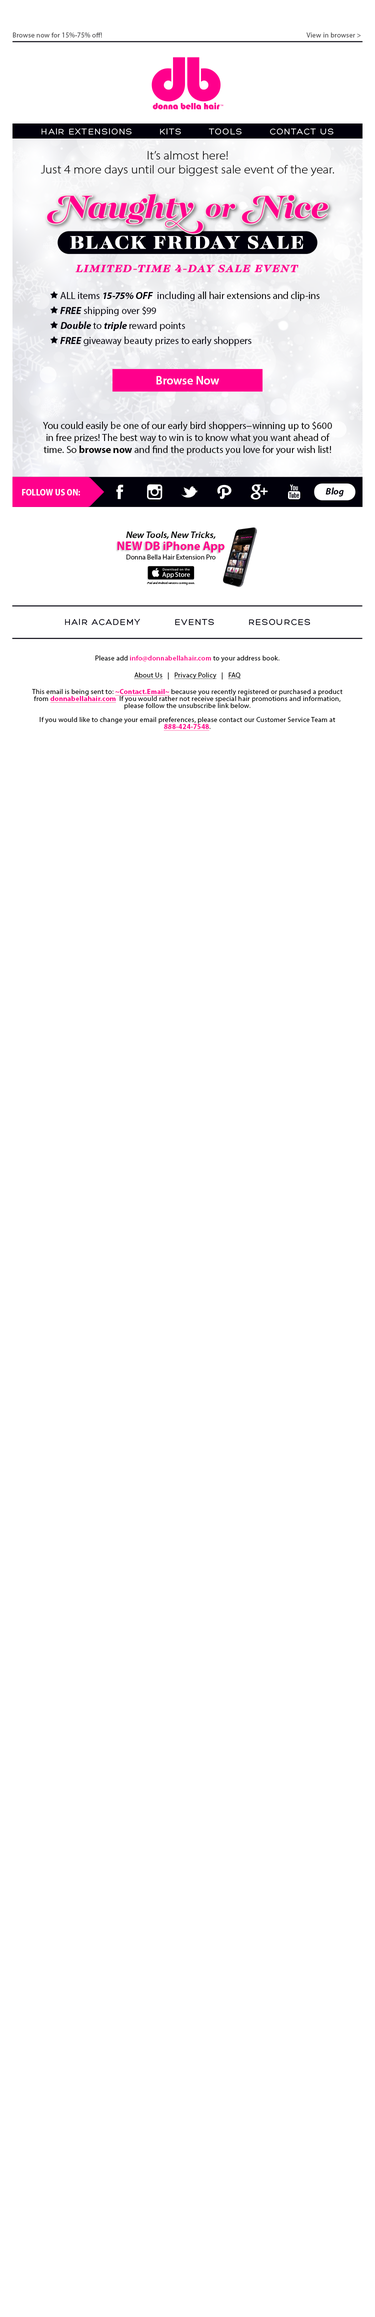
<style>
.page{position:relative;width:375px;height:2317px;background:#ffffff}
.page>*{position:absolute;margin:0}
.t1{font:7px "MyriadPro-Regular";letter-spacing:0.025em;color:#4d4d4f}
.t2{font:9px "Hero";letter-spacing:0.1em;color:#ffffff}
.t3{font:12px "MyriadPro-LightSemiExt";color:#000000}
.t4{font:12px "MyriadPro-Semibold";color:#ffffff}
.t5{font:10px "MyriadPro-Regular";color:#000000}
.t6{font:10px "MyriadPro-Bold";color:#000000}
.t7{font:9px "MyriadPro-BoldSemiCn";color:#ffffff}
.t8{font:9.3px "MyriadPro-BoldIt";color:#01000b}
.t9{font:9px "MyriadPro-SemiboldSemiExtIt";color:#000000}
.t10{font:12px "MyriadPro-Bold";color:#ff008c}
.t11{font:7px "MyriadPro-Regular";color:#000000}
.t12{font:3px "MyriadPro-It";color:#000000}
.t13{font:9px "Hero";letter-spacing:0.1em;color:#01000b}
.t14{font:7px/7px "MyriadPro-Regular";letter-spacing:0.025em;color:#000000}
.t15{font:7px "MyriadPro-Regular";letter-spacing:0.025em;color:#000000}
.t16{font:7px "MyriadPro-Semibold";letter-spacing:0.025em;color:#ff008c}
.t17{font:7px "MyriadPro-Regular";letter-spacing:0.025em;color:#000000;text-decoration:underline}
.t18{font:7px "MyriadPro-Bold";letter-spacing:0.025em;color:#ff008c;text-decoration:underline}
.t19{font:7px/7px "MyriadPro-Bold";letter-spacing:0.025em;color:#ff008c;text-decoration:underline}
</style>
<div class="page">
<p class="t1" style="left:13px;top:32px;width:348px;height:6px">Browse now for 15%­-75% off!                         View in browser &gt;</p>
<p class="t2" style="left:42px;top:128px;width:292px;height:7px">HAIR EXTENSIONS        KITS        TOOLS        CONTACT US</p>
<p class="t3" style="left:40px;top:151px;width:294px;height:25px;text-align:center">It’s almost here!<br>Just 4 more days until our biggest sale event of the year.</p>
<p class="t4" style="left:156px;top:376px;width:64px;height:8px">Browse Now</p>
<p class="t5" style="left:43px;top:422px;width:289px;height:33px;text-align:center">You could easily be one of our early bird shoppers­­−winning up to $600 in free prizes! The best way to win is to know what you want ahead of time. So <span class="t6">browse now</span> and find the products you love for your wish list!</p>
<p class="t7" style="left:22px;top:489px;width:58px;height:7px">FOLLOW US ON:</p>
<p class="t8" style="left:326px;top:488px;width:18px;height:8px">Blog</p>
<p class="t9" style="left:126px;top:532px;width:90px;height:7px">New Tools, New Tricks,</p>
<p class="t10" style="left:118px;top:542px;width:106px;height:10px">NEW DB iPhone App</p>
<p class="t11" style="left:126px;top:554px;width:90px;height:6px">Donna Bella Hair Extension Pro</p>
<p class="t12" style="left:147px;top:582px;width:47px;height:3px">iPad and Android versions coming soon.</p>
<p class="t13" style="left:65px;top:618px;width:245px;height:8px">HAIR ACADEMY          EVENTS          RESOURCES</p>
<p class="t14" style="left:32px;top:656px;width:310px;height:75px;text-align:center"><span class="t15">Please add </span><span class="t16">info@donnabellahair.com</span><span class="t15"> to your address book.<br><br></span><span class="t17">About Us</span><span class="t15">   |   </span><span class="t17">Privacy Policy</span><span class="t15">   |   </span><span class="t17">FAQ<br></span><span class="t15"><br>This email is being sent to: </span><span class="t18">~Contact.Email~</span><span class="t15"> because you recently registered </span>or purchased a product from <span class="t19">donnabellahair.com</span>  If you would rather not receive special hair promotions and information, please follow the unsubscribe link below.<br><br>If you would like to change your email preferences, please contact our Customer Service Team at <span class="t19">888-424-7548</span>.</p>
</div>
